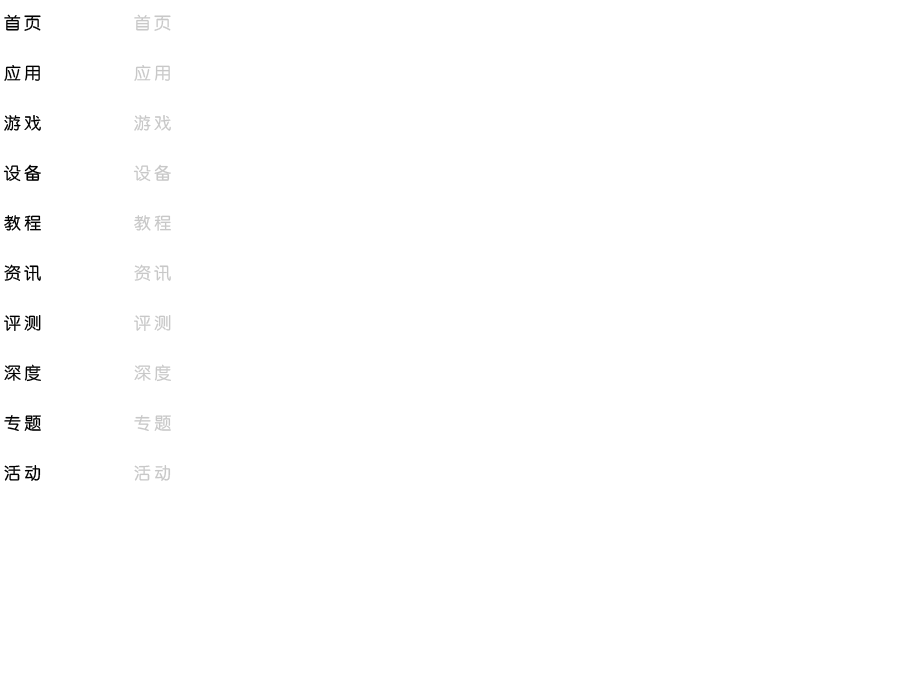
<style>
.page{position:relative;width:900px;height:680px;background:#ffffff}
.page>*{position:absolute;margin:0}
.t1{font:17px/50px "JZunYuan";letter-spacing:0.2em;color:#000000}
.t2{font:17px/50px "JZunYuan";letter-spacing:0.2em;color:#c8c8c8}
</style>
<div class="page">
<p class="t1" style="left:3px;top:14px;width:38px;height:467px">首页<br>应用<br>游戏<br>设备<br>教程<br>资讯<br>评测<br>深度<br>专题<br>活动</p>
<p class="t2" style="left:133px;top:14px;width:38px;height:467px">首页<br>应用<br>游戏<br>设备<br>教程<br>资讯<br>评测<br>深度<br>专题<br>活动</p>
</div>
